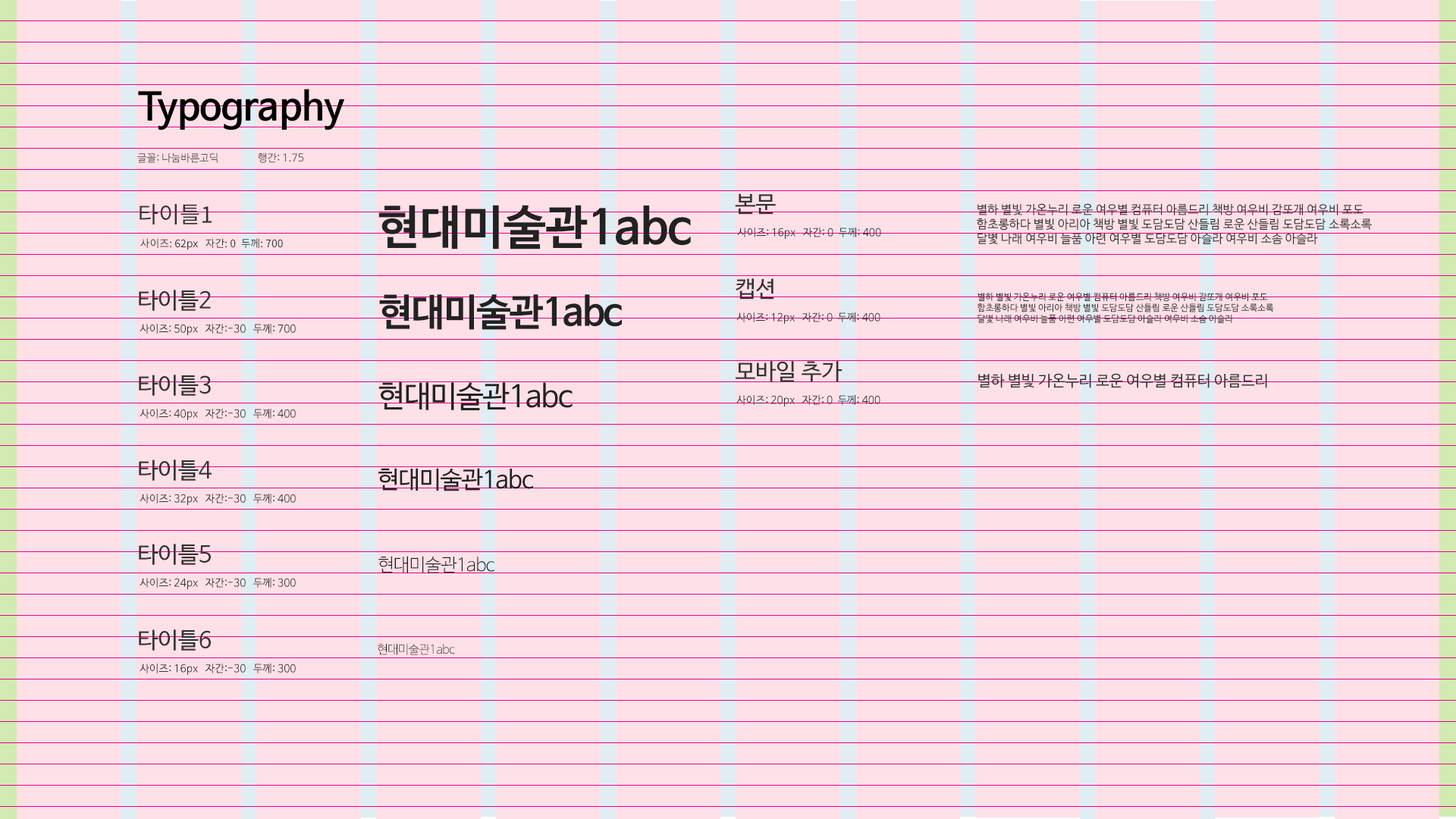
<style>
.page{position:relative;width:1456px;height:819px;background:#fee0e7}
.page>*{position:absolute;margin:0}
.t1{font:37.9px "NanumBarunGothicBold";color:#000000}
.t2{font:10.6px "NanumBarunGothic";color:#555555}
.t3{font:22.7px "NanumBarunGothic";color:#333333}
.t4{font:22.7px "NotoSansKR-Regular";color:#333333}
.t5{font:47px "NanumBarunGothicBold";color:#222222}
.t6{font:12.1px "NanumBarunGothic";color:#333333}
.t7{font:10.6px "NanumBarunGothic";color:#333333}
.t8{font:10.6px "NotoSansKR-Regular";color:#333333}
.t9{font:9.1px "NanumBarunGothic";color:#333333}
.t10{font:37.9px "NanumBarunGothicBold";letter-spacing:-0.03em;color:#222222}
.t11{font:15.2px "NanumBarunGothic";color:#333333}
.t12{font:30.3px "NanumBarunGothic";letter-spacing:-0.03em;color:#222222}
.t13{font:24.3px "NanumBarunGothic";letter-spacing:-0.03em;color:#222222}
.t14{font:18.2px "NanumBarunGothicLight";letter-spacing:-0.03em;color:#222222}
.t15{font:12.1px "NanumBarunGothicLight";letter-spacing:-0.03em;color:#222222}
</style>
<div class="page">
<p class="t1" style="left:138px;top:89px;width:207px;height:41px">Typography</p>
<p class="t2" style="left:137px;top:152px;width:81px;height:11px">글꼴: 나눔바른고딕</p>
<p class="t2" style="left:258px;top:152px;width:46px;height:11px">행간: 1.75</p>
<p class="t3" style="left:735px;top:193px;width:41px;height:22px">본문</p>
<p class="t4" style="left:140px;top:204px;width:72px;height:20px">타이틀1</p>
<p class="t5" style="left:378px;top:205px;width:313px;height:44px">현대미술관1abc</p>
<p class="t6" style="left:977px;top:203px;width:395px;height:41px">별하 별빛 가온누리 로운 여우별 컴퓨터 아름드리 책방 여우비 감또개 여우비 포도 <br>함초롱하다 별빛 아리아 책방 별빛 도담도담 산들림 로운 산들림 도담도담 소록소록 <br>달볓 나래 여우비 늘품 아련 여우별 도담도담 아슬라 여우비 소솜 아슬라</p>
<p class="t7" style="left:737px;top:227px;width:144px;height:12px">사이즈: 16px   자간: 0  두께: 400</p>
<p class="t8" style="left:140px;top:238px;width:143px;height:12px">사이즈: 62px   자간: 0  두께: 700</p>
<p class="t3" style="left:736px;top:278px;width:38px;height:22px">캡션</p>
<p class="t3" style="left:139px;top:290px;width:72px;height:21px">타이틀2</p>
<p class="t9" style="left:977px;top:293px;width:297px;height:30px">별하 별빛 가온누리 로운 여우별 컴퓨터 아름드리 책방 여우비 감또개 여우비 포도 <br>함초롱하다 별빛 아리아 책방 별빛 도담도담 산들림 로운 산들림 도담도담 소록소록 <br>달볓 나래 여우비 늘품 아련 여우별 도담도담 아슬라 여우비 소솜 아슬라</p>
<p class="t10" style="left:379px;top:294px;width:243px;height:36px">현대미술관1abc</p>
<p class="t7" style="left:736px;top:312px;width:144px;height:12px">사이즈: 12px   자간: 0  두께: 400</p>
<p class="t7" style="left:140px;top:324px;width:156px;height:11px">사이즈: 50px   자간:-30   두께: 700</p>
<p class="t3" style="left:736px;top:361px;width:106px;height:21px">모바일 추가</p>
<p class="t3" style="left:139px;top:375px;width:72px;height:21px">타이틀3</p>
<p class="t11" style="left:978px;top:373px;width:289px;height:15px">별하 별빛 가온누리 로운 여우별 컴퓨터 아름드리</p>
<p class="t12" style="left:378px;top:382px;width:195px;height:28px">현대미술관1abc</p>
<p class="t7" style="left:736px;top:395px;width:144px;height:11px">사이즈: 20px   자간: 0  두께: 400</p>
<p class="t7" style="left:140px;top:409px;width:156px;height:11px">사이즈: 40px   자간:-30   두께: 400</p>
<p class="t3" style="left:139px;top:460px;width:73px;height:21px">타이틀4</p>
<p class="t13" style="left:378px;top:468px;width:155px;height:23px">현대미술관1abc</p>
<p class="t7" style="left:140px;top:494px;width:156px;height:11px">사이즈: 32px   자간:-30   두께: 400</p>
<p class="t3" style="left:139px;top:544px;width:72px;height:21px">타이틀5</p>
<p class="t14" style="left:378px;top:556px;width:116px;height:17px">현대미술관1abc</p>
<p class="t7" style="left:140px;top:578px;width:156px;height:11px">사이즈: 24px   자간:-30   두께: 300</p>
<p class="t3" style="left:139px;top:629px;width:72px;height:22px">타이틀6</p>
<p class="t15" style="left:378px;top:644px;width:77px;height:11px">현대미술관1abc</p>
<p class="t7" style="left:140px;top:664px;width:156px;height:11px">사이즈: 16px   자간:-30   두께: 300</p>
</div>
